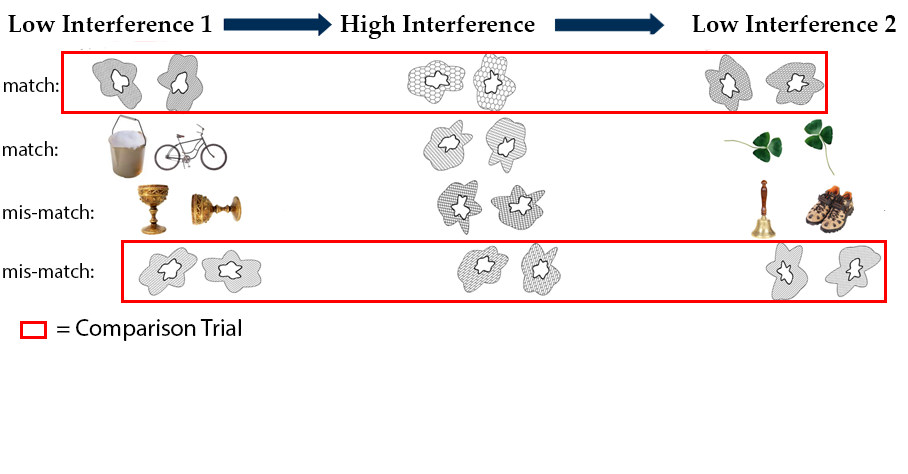
<style>
.page{position:relative;width:908px;height:474px;background:#ffffff}
.page>*{position:absolute;margin:0}
.t1{font:24px "PalatinoLinotype-Bold";color:#000000}
.t2{font:20px "MyriadPro-Regular";color:#000000}
.t3{font:24px "MyriadPro-Regular";color:#000000}
</style>
<div class="page">
<p class="t1" style="left:8px;top:15px;width:204px;height:17px">Low Interference 1</p>
<p class="t1" style="left:340px;top:15px;width:195px;height:24px">High Interference</p>
<p class="t1" style="left:692px;top:15px;width:204px;height:17px">Low Interference 2</p>
<p class="t2" style="left:4px;top:77px;width:55px;height:15px">match:</p>
<p class="t2" style="left:3px;top:141px;width:55px;height:15px">match:</p>
<p class="t2" style="left:3px;top:204px;width:91px;height:15px">mis-match:</p>
<p class="t2" style="left:3px;top:263px;width:91px;height:15px">mis-match:</p>
<p class="t3" style="left:57px;top:319px;width:184px;height:22px">= Comparison Trial</p>
</div>
